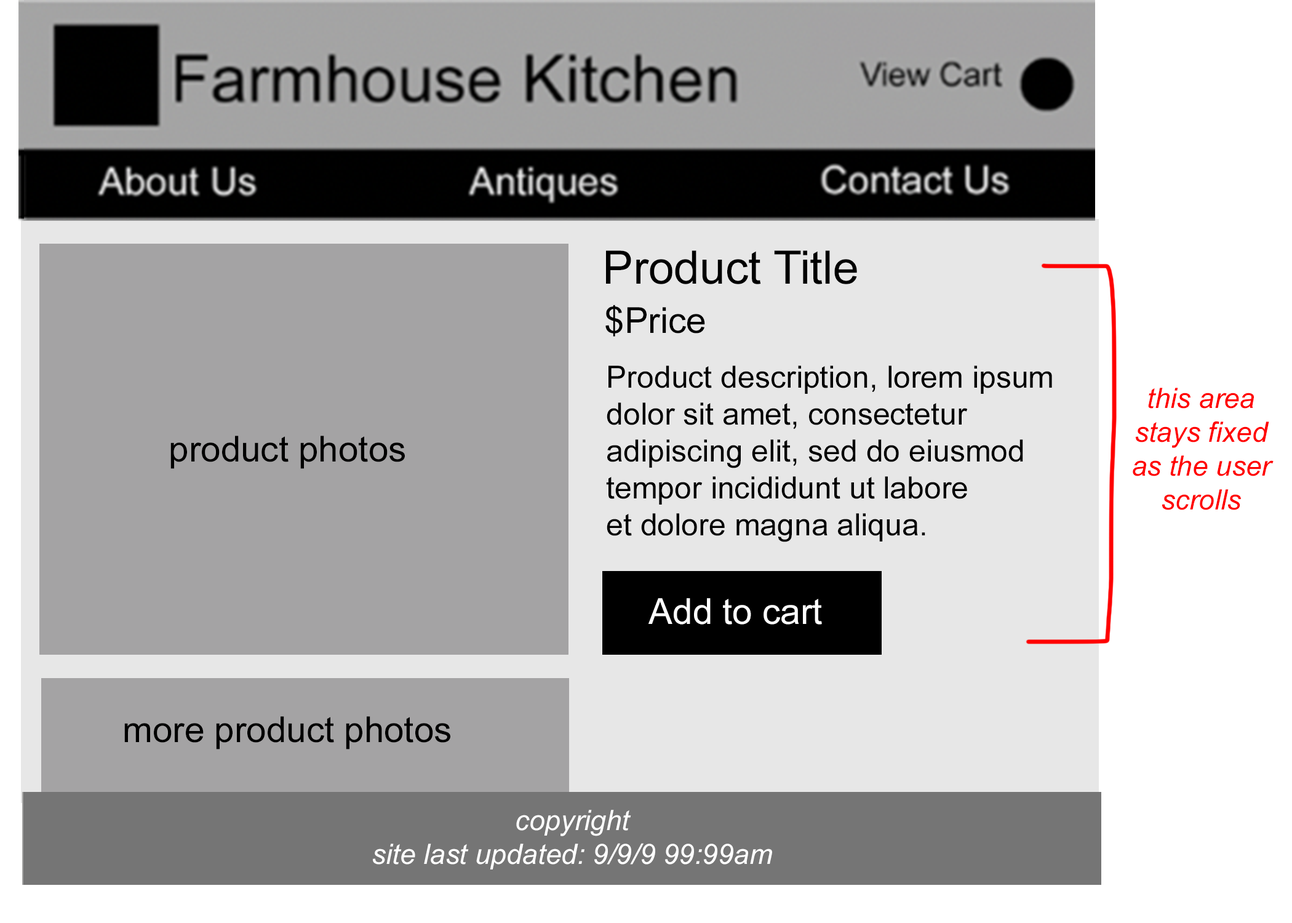
<style>
.page{position:relative;width:1292px;height:923px;background:#a4a3a4}
.page>*{position:absolute;margin:0}
.t1{font:46.1px "ArialMT";color:#000000}
.t2{font:35.9px "ArialMT";color:#000000}
.t3{font:30.8px "ArialMT";color:#000000}
.t4{font:28.2px "Arial-ItalicMT";color:#ff0000}
.t5{font:35.9px "ArialMT";color:#ffffff}
.t6{font:28.2px "Arial-ItalicMT";color:#ffffff}
</style>
<div class="page">
<p class="t1" style="left:606px;top:250px;width:251px;height:34px">Product Title</p>
<p class="t2" style="left:605px;top:305px;width:100px;height:32px">$Price</p>
<p class="t3" style="left:606px;top:365px;width:446px;height:177px">Product description, lorem ipsum <br>dolor sit amet, consectetur<br>adipiscing elit, sed do eiusmod<br>tempor incididunt ut labore<br>et dolore magna aliqua.</p>
<p class="t4" style="left:1133px;top:388px;width:141px;height:122px;text-align:center">this area<br>stays fixed<br>as the user<br>scrolls</p>
<p class="t2" style="left:170px;top:436px;width:235px;height:33px">product photos</p>
<p class="t5" style="left:648px;top:598px;width:174px;height:26px">Add to cart</p>
<p class="t2" style="left:124px;top:716px;width:326px;height:33px">more product photos</p>
<p class="t6" style="left:373px;top:810px;width:399px;height:59px;text-align:center">copyright<br>site last updated: 9/9/9 99:99am</p>
</div>
